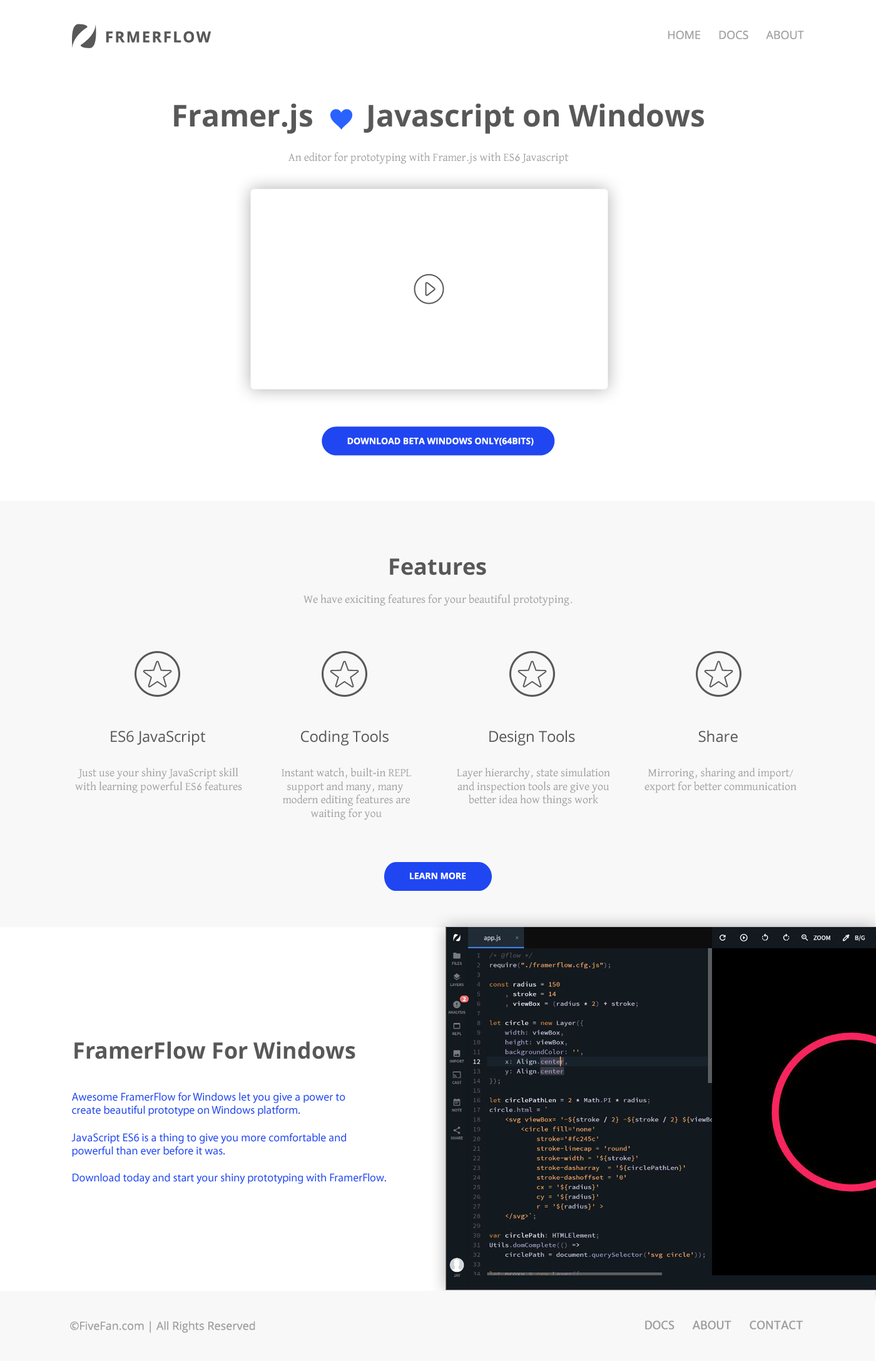
<style>
.page{position:relative;width:876px;height:1361px;background:#ffffff}
.page>*{position:absolute;margin:0}
.t1{font:15px "OpenSans-Bold";letter-spacing:0.1em;color:#585858}
.t2{font:11.3px "OpenSans";color:#9e9e9e}
.t3{font:30px "OpenSans-Bold";color:#585858}
.t4{font:11.3px "DavidLibre-Regular";color:#9e9e9e}
.t5{font:8.8px "OpenSans-Bold";color:#ffffff}
.t6{font:22.5px "OpenSans-Bold";color:#585858}
.t7{font:15px "OpenSans";color:#585858}
.t8{font:11.3px "MyriadPro-Regular";color:#2046f2}
.t9{font:11.3px "MerriweatherSans-Regular";color:#9e9e9e}
</style>
<div class="page">
<p class="t1" style="left:106px;top:31px;width:105px;height:12px">FRMERFLOW</p>
<p class="t2" style="left:668px;top:31px;width:136px;height:8px">HOME      DOCS      ABOUT</p>
<p class="t3" style="left:174px;top:103px;width:530px;height:31px">Framer.js       Javascript on Windows</p>
<p class="t4" style="left:288px;top:152px;width:281px;height:12px">An editor for prototyping with Framer.js with ES6 Javascript</p>
<p class="t5" style="left:347px;top:438px;width:187px;height:8px">DOWNLOAD BETA WINDOWS ONLY(64BITS)</p>
<p class="t6" style="left:390px;top:558px;width:96px;height:17px">Features</p>
<p class="t4" style="left:304px;top:594px;width:269px;height:12px">We have exiciting features for your beautiful prototyping.</p>
<p class="t7" style="left:111px;top:730px;width:94px;height:15px">ES6 JavaScript</p>
<p class="t7" style="left:301px;top:730px;width:88px;height:15px">Coding Tools</p>
<p class="t7" style="left:489px;top:730px;width:86px;height:15px">Design Tools</p>
<p class="t7" style="left:699px;top:730px;width:39px;height:12px">Share</p>
<p class="t4" style="left:75px;top:767px;width:167px;height:26px;text-align:center">Just use your shiny JavaScript skill<br>with learning powerful ES6 features</p>
<p class="t4" style="left:282px;top:767px;width:129px;height:53px;text-align:center">Instant watch, built-in REPL<br>support and many, many <br>modern editing features are<br>waiting for you</p>
<p class="t4" style="left:457px;top:767px;width:153px;height:39px;text-align:center">Layer hierarchy, state simulation<br>and inspection tools are give you<br>better idea how things work</p>
<p class="t4" style="left:645px;top:767px;width:152px;height:26px;text-align:center">Mirroring, sharing and import/<br>export for better communication</p>
<p class="t5" style="left:410px;top:872px;width:56px;height:7px">LEARN MORE</p>
<p class="t6" style="left:74px;top:1041px;width:282px;height:18px">FramerFlow For Windows</p>
<p class="t8" style="left:71px;top:1092px;width:315px;height:92px">Awesome FramerFlow for Windows let you give a power to<br>create beautiful prototype on Windows platform.<br><br>JavaScript ES6 is a thing to give you more comfortable and<br>powerful than ever before it was.<br><br>Download today and start your shiny prototyping with FramerFlow.</p>
<p class="t2" style="left:70px;top:1321px;width:185px;height:12px">©FiveFan.com | All Rights Reserved</p>
<p class="t9" style="left:645px;top:1320px;width:158px;height:9px">DOCS     ABOUT     CONTACT</p>
</div>
